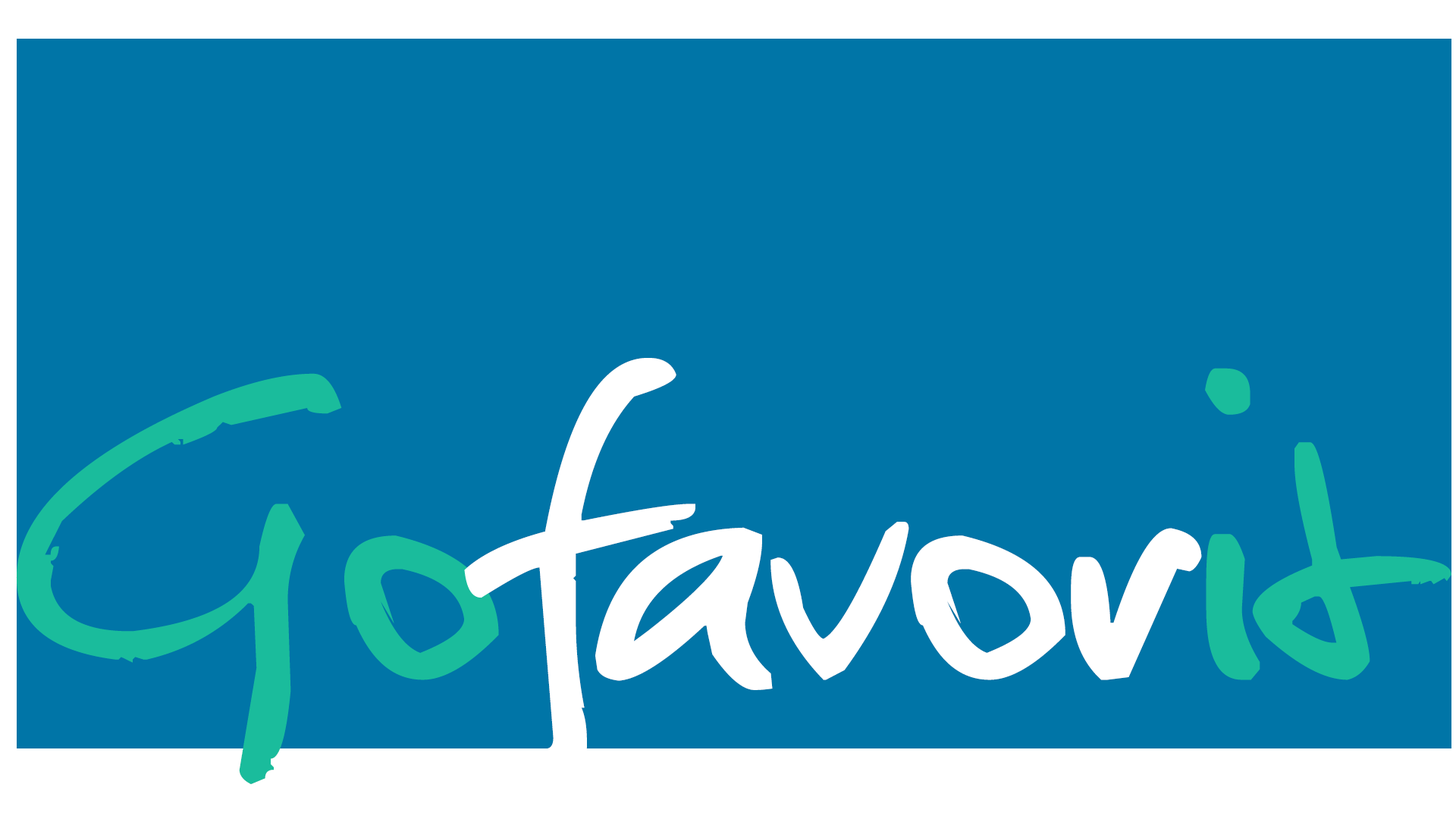
<style>
.page{position:relative;width:1456px;height:819px;background:#0075a7}
.page>*{position:absolute;margin:0}
.t1{font:600.7px "Christopherhand";color:#ffffff}
.t2{font:600.7px "Christopherhand";color:#1abc9c}
</style>
<div class="page">
<p class="t1" style="left:16px;top:358px;width:1435px;height:426px"><span class="t2">Go</span>favor<span class="t2">it</span></p>
</div>
